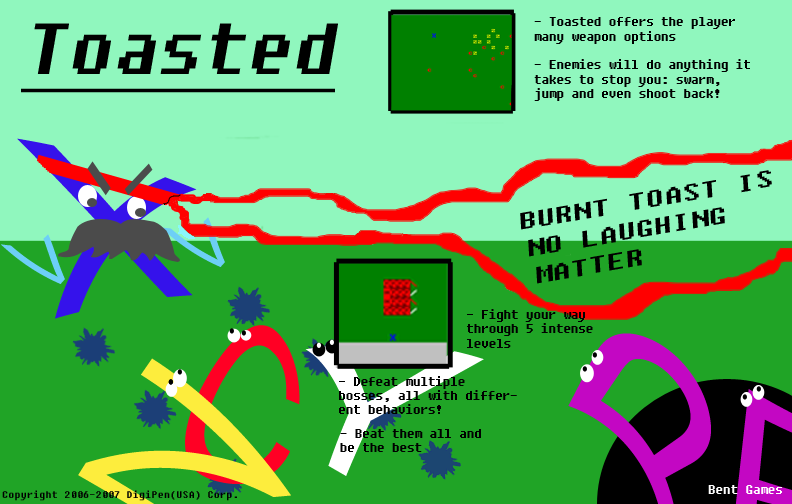
<style>
.page{position:relative;width:792px;height:504px;background:#90f7be}
.page>*{position:absolute;margin:0}
.t1{font:12px "Fixedsys";color:#000000}
.t2{font:71.7px "Fixedsys";color:#000000;font-style:italic;text-decoration:underline}
.t3{font:23.3px "Fixedsys";color:#000000;font-style:italic;scale:1.27 1}
.t4{font:88.8px "ArialMT";color:#6dcff6;scale:0.58 1}
.t5{font:179.2px "ArialMT";color:#ff0024}
.t6{font:179.3px "ArialMT";color:#ffffff}
.t7{font:12px "Fixedsys";color:#ffffff}
.t8{font:10px "Fixedsys";color:#000000}
</style>
<div class="page">
<p class="t1" style="left:534px;top:17px;width:216px;height:84px">- Toasted offers the player many weapon options<br><br>- Enemies will do anything it takes to stop you: swarm, jump and even shoot back!</p>
<p class="t2" style="left:21px;top:23px;width:317px;height:70px">Toasted</p>
<p class="t3" style="left:520px;top:170px;width:252px;height:114px;rotate:-10deg">BURNT TOAST IS NO LAUGHING MATTER</p>
<p class="t4" style="left:1px;top:234px;width:64px;height:50px;rotate:-43deg">V</p>
<p class="t1" style="left:467px;top:309px;width:126px;height:39px">- Fight your way through 5 intense levels</p>
<p class="t5" style="left:185px;top:325px;width:115px;height:159px;rotate:14deg">C</p>
<p class="t6" style="left:305px;top:345px;width:179px;height:131px;rotate:28deg">Y</p>
<p class="t1" style="left:339px;top:376px;width:178px;height:38px">- Defeat multiple bosses, all with different behaviors!</p>
<p class="t1" style="left:340px;top:429px;width:141px;height:23px">- Beat them all and  be the best</p>
<p class="t7" style="left:708px;top:485px;width:74px;height:9px">Bent Games</p>
<p class="t8" style="left:2px;top:490px;width:235px;height:11px">Copyright 2006-2007 DigiPen(USA) Corp.</p>
</div>
